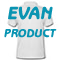
<style>
.page{position:relative;width:60px;height:60px;background:#ffffff}
.page>*{position:absolute;margin:0}
.t1{font:12px/18px "BenguiatGothic-HeavyOblique";letter-spacing:-0.01em;color:#0994b2}
.t2{font:18px/18px "BenguiatGothic-HeavyOblique";letter-spacing:-0.01em;color:#0994b2}
</style>
<div class="page">
<p class="t1" style="left:4px;top:6px;width:53px;height:32px;text-align:center"><span class="t2">EVAN<br></span>PRODUCT</p>
</div>
